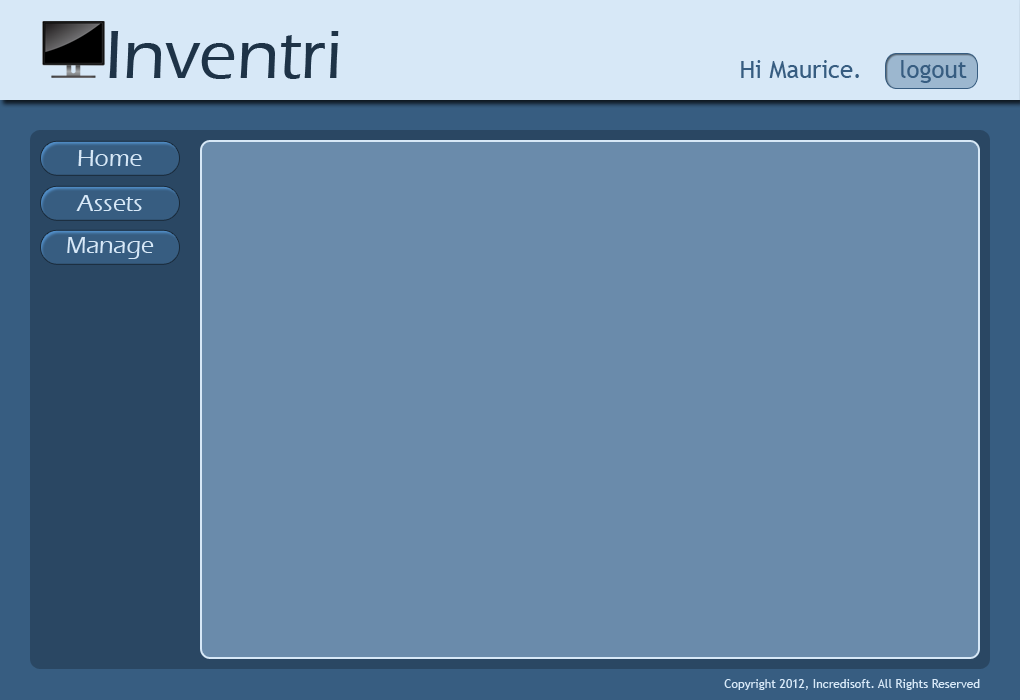
<style>
.page{position:relative;width:1020px;height:700px;background:#6a8bab}
.page>*{position:absolute;margin:0}
.t1{font:70px "ErasITC-Medium";color:#1e3347}
.t2{font:24px "TrebuchetMS";color:#375d81}
.t3{font:24px "ErasITC-Medium";color:#d7e8f7}
.t4{font:12px "TrebuchetMS";color:#d7e8f7}
</style>
<div class="page">
<p class="t1" style="left:109px;top:31px;width:230px;height:48px">Inventri</p>
<p class="t2" style="left:741px;top:60px;width:118px;height:18px">Hi Maurice.</p>
<p class="t2" style="left:901px;top:60px;width:66px;height:23px">logout</p>
<p class="t3" style="left:78px;top:150px;width:64px;height:16px">Home</p>
<p class="t3" style="left:76px;top:195px;width:66px;height:16px">Assets</p>
<p class="t3" style="left:67px;top:237px;width:87px;height:22px">Manage</p>
<p class="t4" style="left:724px;top:679px;width:256px;height:11px">Copyright 2012, Incredisoft. All Rights Reserved</p>
</div>
